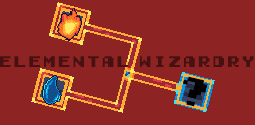
<style>
.page{position:relative;width:255px;height:125px;background:#8e2323}
.page>*{position:absolute;margin:0}
.t1{font:14px "Early-GameBoy";letter-spacing:0.05em;color:#471111}
.t2{font:31.3px "Early-GameBoy";letter-spacing:0.05em;color:#000000}
</style>
<div class="page">
<p class="t1" style="left:0px;top:56px;width:254px;height:11px">Elemental Wizardry</p>
<p class="t2" style="left:183px;top:76px;width:24px;height:31px;rotate:13deg">?</p>
</div>
